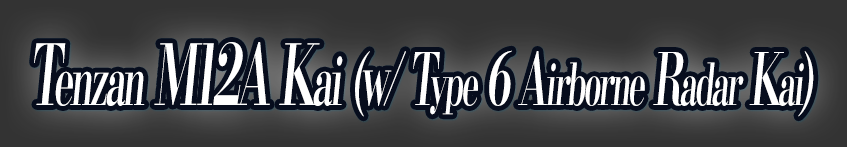
<style>
.page{position:relative;width:847px;height:147px}
.page>*{position:absolute;margin:0}
.t1{font:57.6px "KochoStd-Heavy";letter-spacing:-0.08em;color:#ffffff;font-style:italic;scale:0.55 1}
.t2{font:84px "KochoStd-Heavy";letter-spacing:-0.08em;color:#ffffff;font-style:italic;scale:0.55 1}
.t3{font:67.2px "KochoStd-Heavy";letter-spacing:-0.08em;color:#ffffff;font-style:italic;scale:0.55 1}
.t4{font:72px "KochoStd-Heavy";letter-spacing:-0.08em;color:#ffffff;font-style:italic;scale:0.55 1}
</style>
<div class="page">
<p class="t1" style="left:34px;top:42px;width:780px;height:75px"><span class="t2">T</span><span class="t3">enzan</span><span class="t2"> M12A K</span><span class="t3">ai </span><span class="t4">(w/ T</span>ype<span class="t4"> 6 A</span>irborne<span class="t4"> R</span>adar<span class="t4"> K</span>ai<span class="t4">)</span></p>
</div>
